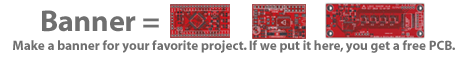
<style>
.page{position:relative;width:468px;height:60px;background:#ffffff}
.page>*{position:absolute;margin:0}
.t1{font:30.1px "Myriad-Bold";color:#6f6f6f}
.t2{font:13.4px "Myriad-Bold";color:#6f6f6f}
</style>
<div class="page">
<p class="t1" style="left:42px;top:10px;width:117px;height:22px">Banner =</p>
<p class="t2" style="left:13px;top:40px;width:442px;height:13px">Make a banner for your favorite project. If we put it here, you get a free PCB.</p>
</div>
